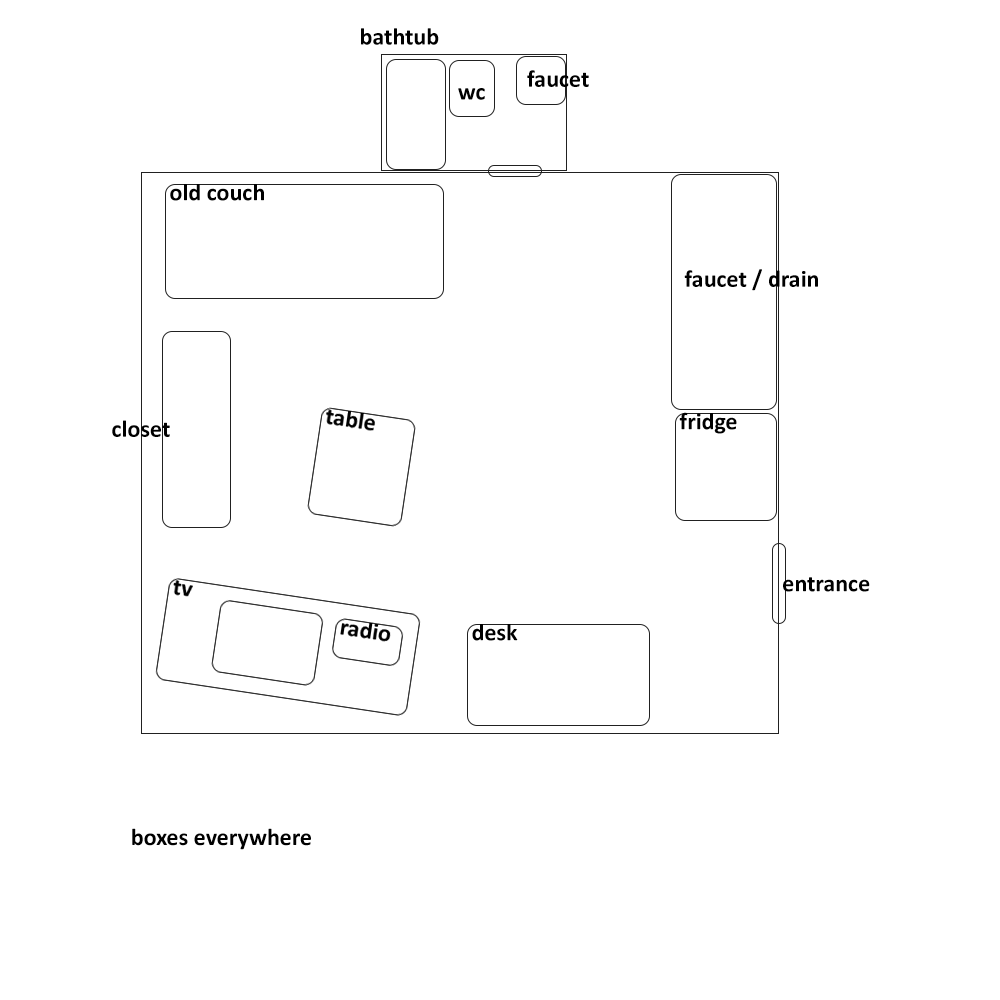
<style>
.page{position:relative;width:1000px;height:1000px;background:#ffffff}
.page>*{position:absolute;margin:0}
.t1{font:24px "Calibri-Bold";color:#000000}
</style>
<div class="page">
<p class="t1" style="left:361px;top:28px;width:78px;height:17px">bathtub</p>
<p class="t1" style="left:527px;top:70px;width:62px;height:17px">faucet</p>
<p class="t1" style="left:458px;top:88px;width:27px;height:12px">wc</p>
<p class="t1" style="left:170px;top:184px;width:94px;height:17px">old couch</p>
<p class="t1" style="left:684px;top:269px;width:134px;height:22px">faucet / drain</p>
<p class="t1" style="left:679px;top:412px;width:58px;height:22px">fridge</p>
<p class="t1" style="left:112px;top:420px;width:58px;height:17px">closet</p>
<p class="t1" style="left:783px;top:577px;width:87px;height:15px">entrance</p>
<p class="t1" style="left:472px;top:624px;width:46px;height:17px">desk</p>
<p class="t1" style="left:132px;top:828px;width:179px;height:22px">boxes everywhere</p>
</div>
